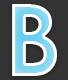
<style>
.page{position:relative;width:68px;height:80px;background:#333333}
.page>*{position:absolute;margin:0}
.t1{font:100px "CenturyGothic-Bold"}
</style>
<div class="page">
<p class="t1" style="left:12px;top:4px;width:45px;height:72px">B</p>
</div>
